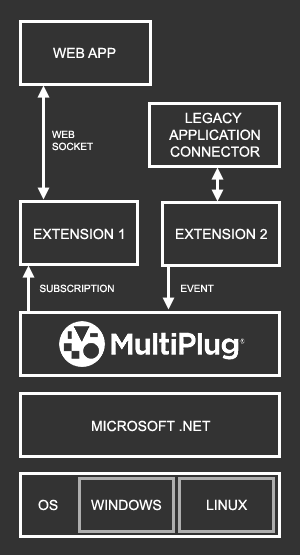
<style>
.page{position:relative;width:300px;height:555px;background:#333333}
.page>*{position:absolute;margin:0}
.t1{font:14px "ArialMT";color:#ffffff}
.t2{font:10px "ArialMT";color:#ffffff}
</style>
<div class="page">
<p class="t1" style="left:53px;top:47px;width:63px;height:11px">WEB APP</p>
<p class="t1" style="left:169px;top:112px;width:91px;height:45px;text-align:center">LEGACY <br>APPLICATION<br>CONNECTOR</p>
<p class="t2" style="left:52px;top:130px;width:41px;height:21px">WEB<br>SOCKET</p>
<p class="t1" style="left:34px;top:228px;width:90px;height:12px">EXTENSION 1</p>
<p class="t1" style="left:176px;top:228px;width:91px;height:12px">EXTENSION 2</p>
<p class="t2" style="left:39px;top:284px;width:75px;height:9px">SUBSCRIPTION</p>
<p class="t2" style="left:181px;top:284px;width:33px;height:8px">EVENT</p>
<p class="t1" style="left:92px;top:420px;width:119px;height:12px">MICROSOFT .NET</p>
<p class="t1" style="left:38px;top:499px;width:20px;height:12px">OS</p>
<p class="t1" style="left:91px;top:499px;width:71px;height:12px">WINDOWS</p>
<p class="t1" style="left:207px;top:499px;width:41px;height:12px">LINUX</p>
</div>
